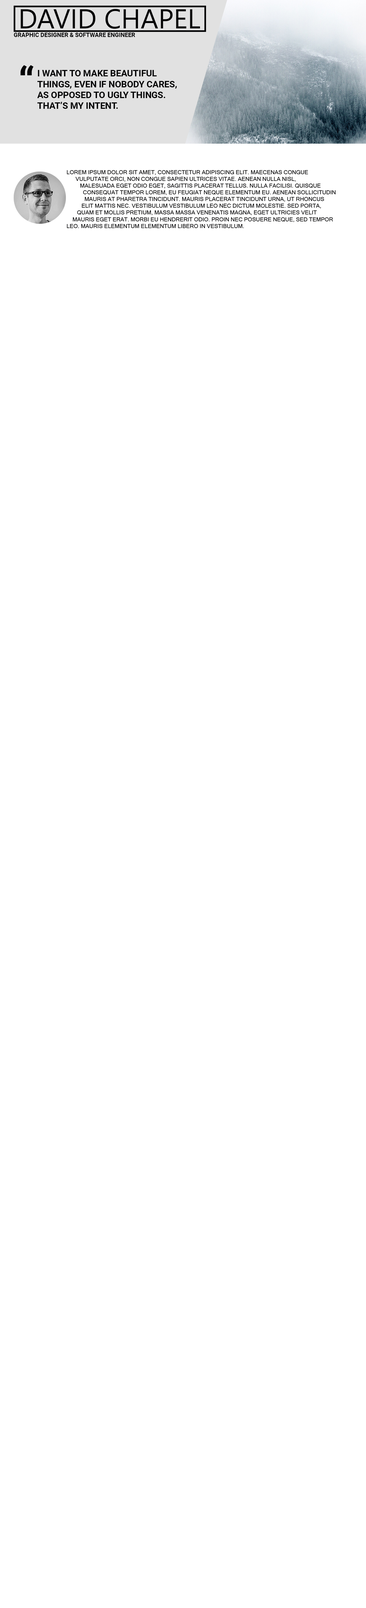
<style>
.page{position:relative;width:366px;height:1608px;background:#ffffff}
.page>*{position:absolute;margin:0}
.t1{font:27.4px "NirmalaUI";color:#040405;text-transform:uppercase}
.t2{font:5.9px "Roboto-Bold";color:#040405;text-transform:uppercase}
.t3{font:40.2px "Roboto-Bold";color:#040405;text-transform:uppercase}
.t4{font:9px "Roboto-Bold";color:#040405;text-transform:uppercase}
.t5{font:5.6px "MicrosoftSansSerif";color:#040405;text-transform:uppercase}
</style>
<div class="page">
<p class="t1" style="left:21px;top:9px;width:179px;height:20px">David Chapel</p>
<p class="t2" style="left:14px;top:33px;width:121px;height:4px">Graphic Designer &amp; software engineer</p>
<p class="t3" style="left:20px;top:65px;width:13px;height:10px">“</p>
<p class="t4" style="left:37px;top:70px;width:140px;height:39px">I want to make beautiful <br>things, even if nobody cares,<br>as opposed to ugly things. <br>That’s my intent.</p>
<p class="t5" style="left:67px;top:170px;width:269px;height:58px">Lorem ipsum dolor sit amet, consectetur adipiscing elit. Maecenas congue <br>      vulputate orci, non congue sapien ultrices vitae. Aenean nulla nisl, <br>         malesuada eget odio eget, sagittis placerat tellus. Nulla facilisi. Quisque <br>           consequat tempor lorem, eu feugiat neque elementum eu. Aenean sollicitudin <br>            mauris at pharetra tincidunt. Mauris placerat tincidunt urna, ut rhoncus<br>          elit mattis nec. Vestibulum vestibulum leo nec dictum molestie. Sed porta,<br>       quam et mollis pretium, massa massa venenatis magna, eget ultricies velit <br>    mauris eget erat. Morbi eu hendrerit odio. Proin nec posuere neque, sed tempor <br>leo. Mauris elementum elementum libero in vestibulum.</p>
</div>
